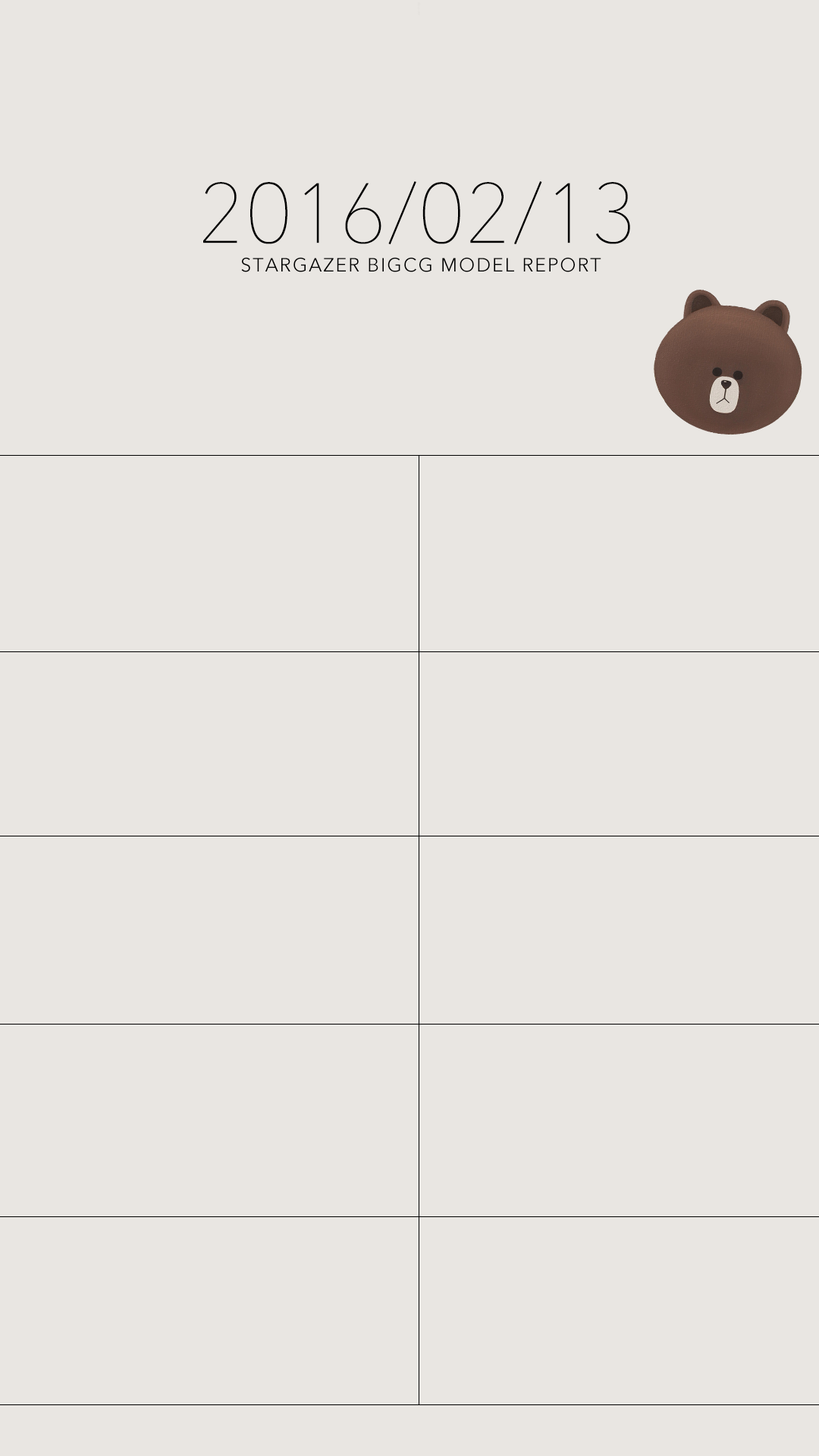
<style>
.page{position:relative;width:819px;height:1456px;background:#e9e6e2}
.page>*{position:absolute;margin:0}
.t1{font:84.3px "AvenirNext-UltraLight";color:#000000}
.t2{font:19px "AvenirNext-Regular";letter-spacing:0.075em;color:#000000}
</style>
<div class="page">
<p class="t1" style="left:203px;top:181px;width:427px;height:63px">2016/02/13</p>
<p class="t2" style="left:241px;top:257px;width:360px;height:15px">STARGAZER BIGCG MODEL REPORT</p>
</div>
